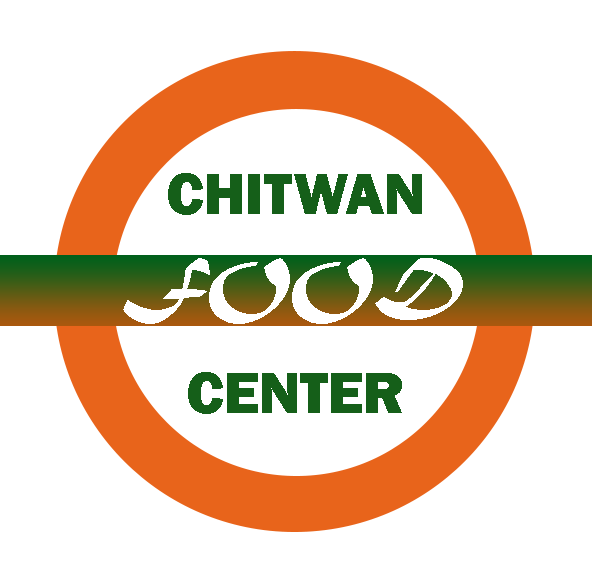
<style>
.page{position:relative;width:592px;height:580px;background:#ffffff}
.page>*{position:absolute;margin:0}
.t1{font:60px "FranklinGothic-Heavy";color:#155f19}
.t2{font:72px "MaturaMTScriptCapitals";color:#ffffff}
</style>
<div class="page">
<p class="t1" style="left:168px;top:173px;width:254px;height:42px">CHITWAN</p>
<p class="t2" style="left:123px;top:258px;width:340px;height:66px">FOOD</p>
<p class="t1" style="left:188px;top:372px;width:214px;height:42px">CENTER</p>
</div>
